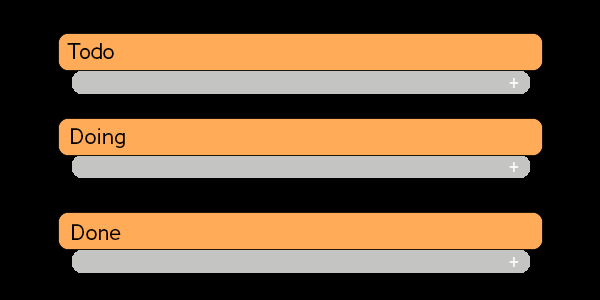
<style>
.page{position:relative;width:600px;height:300px;background:#000000}
.page>*{position:absolute;margin:0}
.t1{font:21.5px "Adrianna-Regular";color:#000000}
.t2{font:24px "Adrianna-Regular";color:#ffffff}
</style>
<div class="page">
<p class="t1" style="left:67px;top:43px;width:47px;height:16px">Todo</p>
<p class="t2" style="left:509px;top:78px;width:10px;height:10px">+</p>
<p class="t1" style="left:71px;top:128px;width:54px;height:20px">Doing</p>
<p class="t2" style="left:509px;top:162px;width:10px;height:10px">+</p>
<p class="t1" style="left:72px;top:224px;width:49px;height:16px">Done</p>
<p class="t2" style="left:509px;top:257px;width:10px;height:10px">+</p>
</div>
